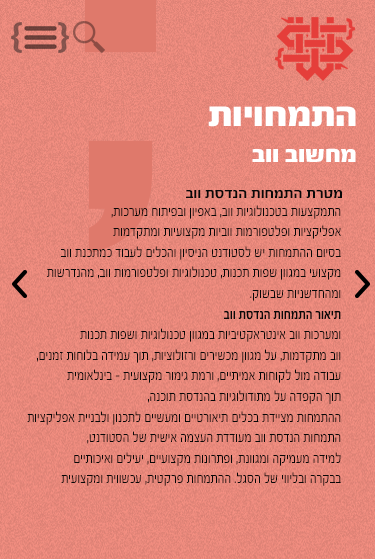
<style>
.page{position:relative;width:375px;height:559px}
.page>*{position:absolute;margin:0}
.t1{font:37.2px "FbScorpion-Black";color:#ffffff}
.t2{font:25px "FbScorpion-Black";color:#ffffff}
.t3{font:15.3px "FbScorpion-Bold";color:#080808}
.t4{font:15.3px/20.6px "FbScorpion-Regular";letter-spacing:0.005em;color:#080808;scale:0.75 1}
.t5{font:15.3px/20.6px "FbScorpion-Bold";letter-spacing:0.005em;color:#080808;scale:0.75 1}
</style>
<div class="page">
<p class="t1" style="left:208px;top:106px;width:148px;height:21px">תויוחמתה</p>
<p class="t2" style="left:252px;top:148px;width:104px;height:14px">בוו בושחמ</p>
<p class="t3" style="left:186px;top:190px;width:156px;height:9px">בוו תסדנה תוחמתה תרטמ</p>
<p class="t4" style="left:27px;top:205px;width:314px;height:281px;text-align:right">,תוכרעמ חותיפבו ןויפאב ,בוו תויגולונכטב תועצקמתה<br>תומדקתמו תויעוצקמ תויבוו תומרופטלפו תויצקילפא<br>בוו תנכתמכ דובעל םילכהו ןויסינה טנדוטסל שי תוחמתהה םויסב<br>תושרדנהמ ,בוו תומרופטלפו תויגולונכט ,תונכת תופש ןווגמב יעוצקמ<br>.קושבש תוינשדחהמו<br><span class="t5">בוו תסדנה תוחמתה רואית<br></span>תונכת תופשו תויגולונכט ןווגמב תויביטקארטניא בוו תוכרעמו<br>,םינמז תוחולב הדימע ךות ,תויצולוזרו םירישכמ ןווגמ לע ,תומדקתמ בוו<br>תימואלניב - תיעוצקמ רומיג תמרו ,םייתימא תוחוקל לומ הדובע<br>,הנכות תסדנהב תויגולודותמ לע הדפקה ךות<br>תויצקילפא תיינבלו ןונכתל םיישעמו םייטרואית םילכב תדייצמ תוחמתהה<br>,טנדוטסה לש תישיא המצעה תדדועמ בוו תסדנה תוחמתה<br>םייתוכיאו םיליעי ,םייעוצקמ תונורתפו ,תנווגמו הקימעמ הדימל<br>תיעוצקמו תיוושכע ,תיטקרפ תוחמתהה .לגסה לש יווילבו הרקבב</p>
</div>
